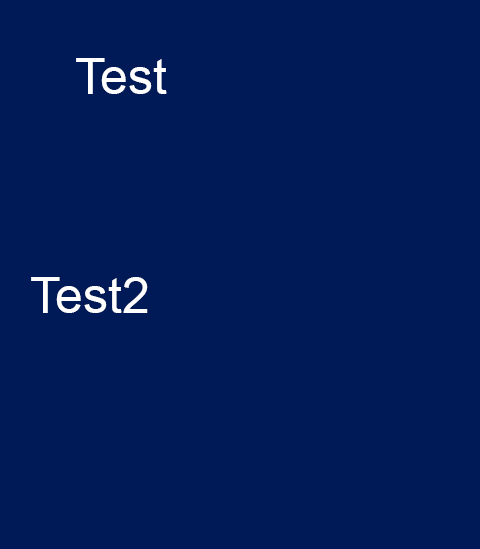
<style>
.page{position:relative;width:480px;height:549px;background:#001a57}
.page>*{position:absolute;margin:0}
.t1{font:50px "ArialMT";color:#ffffff}
</style>
<div class="page">
<p class="t1" style="left:76px;top:58px;width:91px;height:36px">Test</p>
<p class="t1" style="left:31px;top:277px;width:117px;height:36px">Test2</p>
</div>
